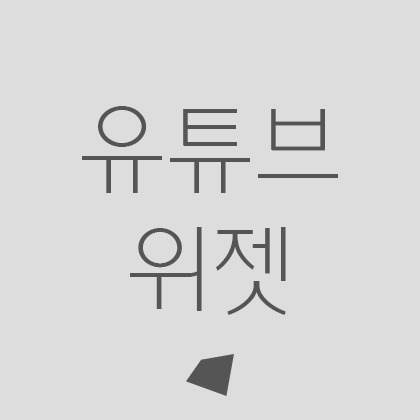
<style>
.page{position:relative;width:420px;height:420px;background:#dddddd}
.page>*{position:absolute;margin:0}
.t1{font:100px "YDotum110";color:#555555}
</style>
<div class="page">
<p class="t1" style="left:82px;top:106px;width:256px;height:209px;text-align:center">유튜브<br>위젯</p>
</div>
